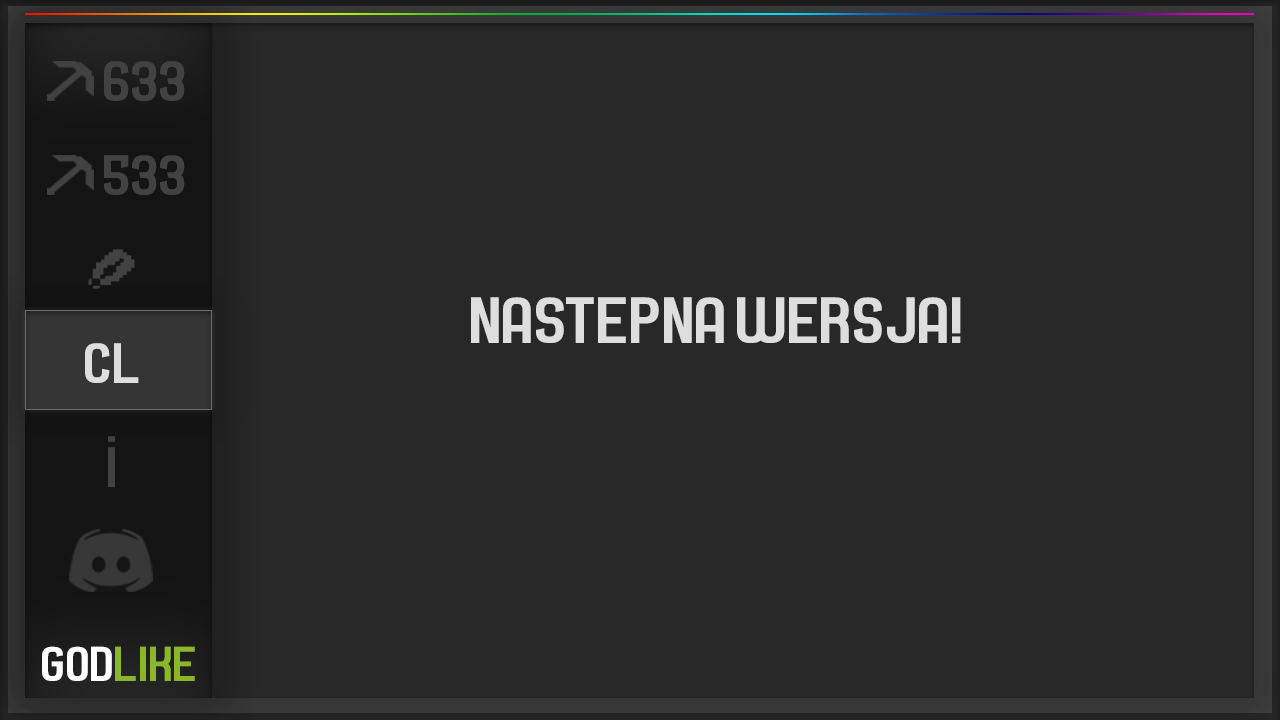
<style>
.page{position:relative;width:1280px;height:720px;background:#282828}
.page>*{position:absolute;margin:0}
.t1{font:58.3px "Septacharge";color:#424242}
.t2{font:66.7px "Septacharge";color:#dedede}
.t3{font:58.3px "Septacharge";color:#dedede}
.t4{font:50px "Septacharge";color:#8ab62a}
.t5{font:50px "Septacharge";color:#ffffff}
</style>
<div class="page">
<p class="t1" style="left:104px;top:61px;width:81px;height:40px">633</p>
<p class="t1" style="left:104px;top:155px;width:81px;height:40px">533</p>
<p class="t2" style="left:471px;top:297px;width:490px;height:46px">NAstepna wersja!</p>
<p class="t3" style="left:85px;top:343px;width:54px;height:40px">CL</p>
<p class="t1" style="left:108px;top:436px;width:7px;height:6px">.</p>
<p class="t4" style="left:42px;top:646px;width:153px;height:35px"><span class="t5">GOD</span>LIKE</p>
</div>
